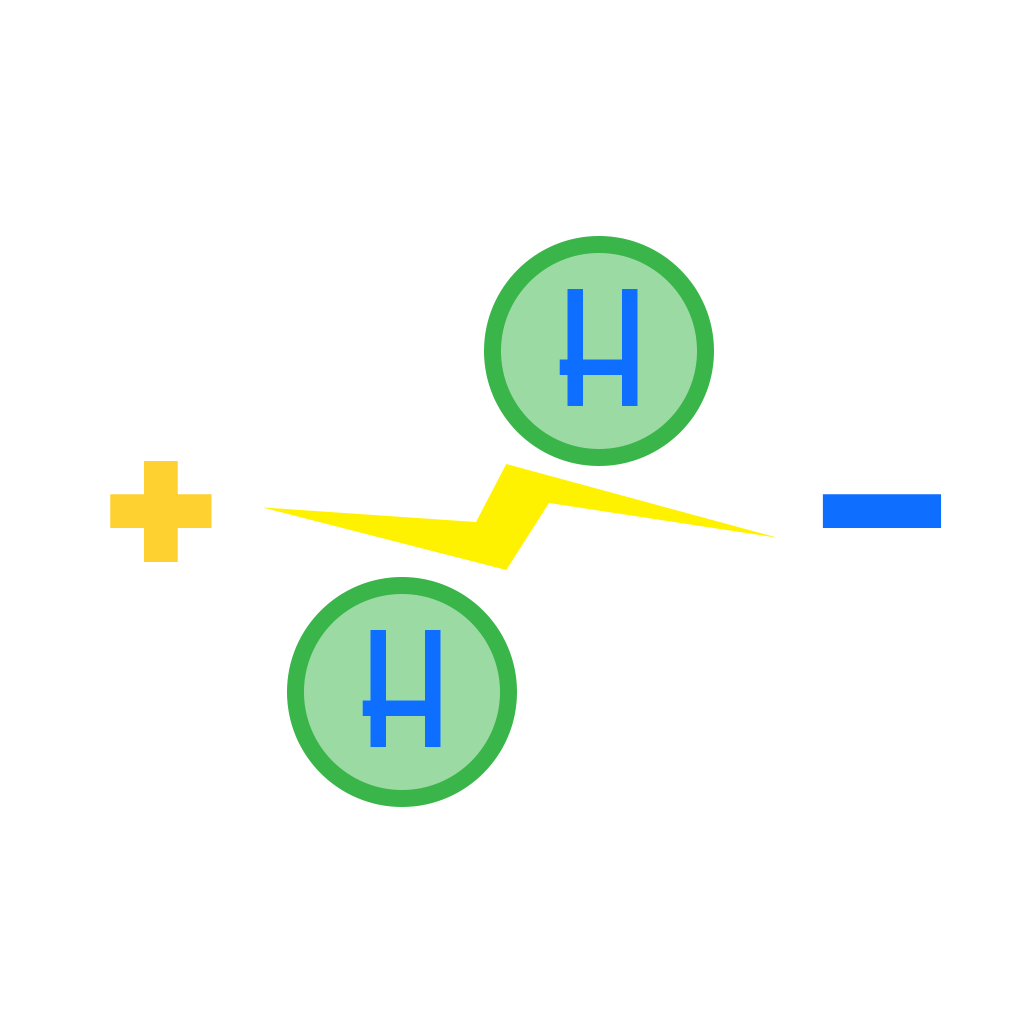
<style>
.page{position:relative;width:1024px;height:1024px;background:#ffffff}
.page>*{position:absolute;margin:0}
.t1{font:155.6px "ScienceFair";color:#0d6eff;font-variant:small-caps}
.t2{font:337.8px "ScienceFair";color:#ffd130}
.t3{font:337.8px "ScienceFair";color:#0d6eff}
</style>
<div class="page">
<p class="t1" style="left:559px;top:289px;width:79px;height:117px">H</p>
<p class="t2" style="left:110px;top:461px;width:102px;height:101px">+</p>
<p class="t3" style="left:822px;top:494px;width:120px;height:34px">-</p>
<p class="t1" style="left:362px;top:630px;width:79px;height:117px">H</p>
</div>
